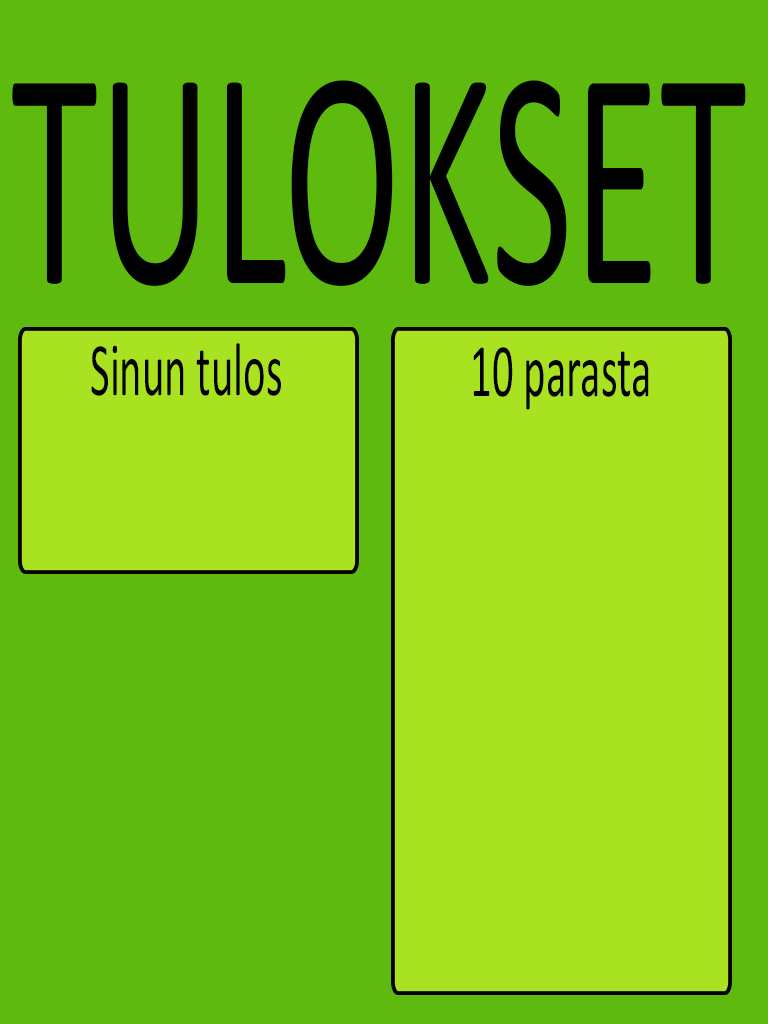
<style>
.page{position:relative;width:768px;height:1024px;background:#5eba0f}
.page>*{position:absolute;margin:0}
.t1{font:316px "Calibri";color:#000000;scale:0.56 1}
.t2{font:76px "Calibri";color:#000000;scale:0.56 1}
</style>
<div class="page">
<p class="t1" style="left:12px;top:80px;width:734px;height:206px">TULOKSET</p>
<p class="t2" style="left:91px;top:343px;width:190px;height:53px">Sinun tulos</p>
<p class="t2" style="left:473px;top:347px;width:176px;height:63px">10 parasta</p>
</div>
